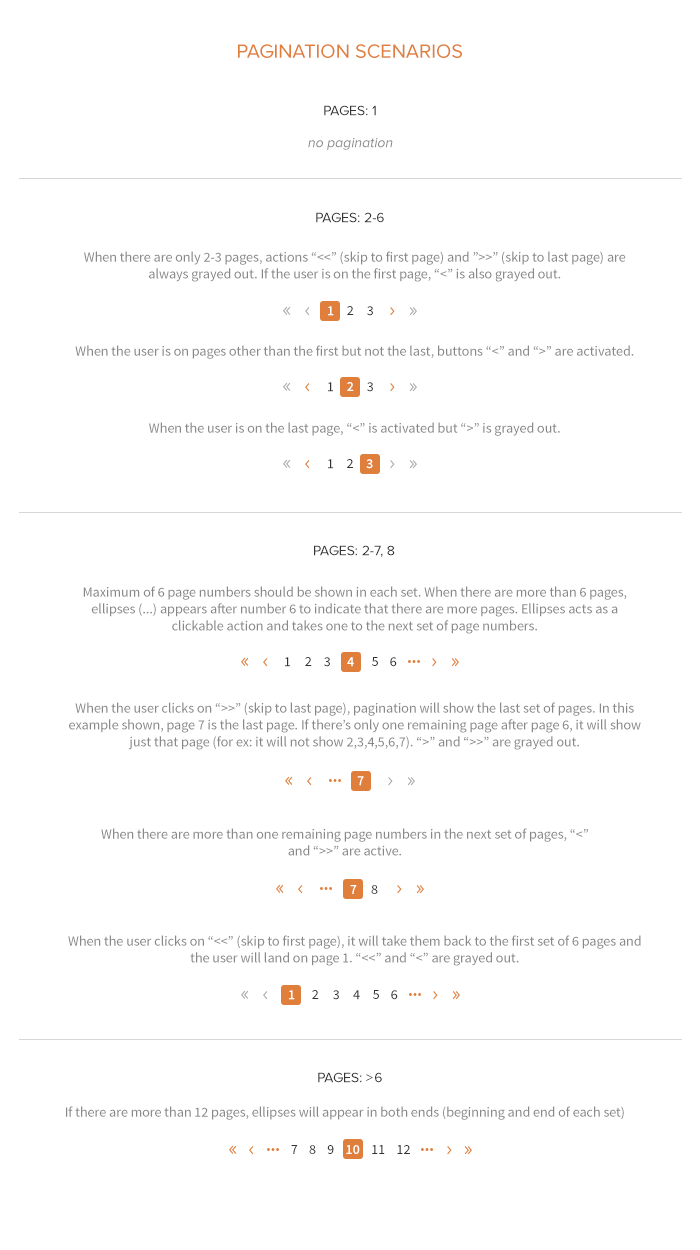
<style>
.page{position:relative;width:700px;height:1250px;background:#ffffff}
.page>*{position:absolute;margin:0}
.t1{font:20px "ProximaNovaA-Regular";color:#e07e3c;text-transform:uppercase}
.t2{font:14px "ProximaNovaA-Regular";color:#333333;text-transform:uppercase}
.t3{font:14px "ProximaNovaA-Regular";color:#888888;font-style:italic}
.t4{font:14px "SourceSansPro-Regular";color:#888888}
.t5{font:14px "SourceSansPro-Semibold";color:#ffffff}
.t6{font:14px "SourceSansPro-Regular";color:#333333}
.t7{font:14px "SourceSansPro-Semibold";color:#333333}
.t8{font:14px "SourceSansPro-Regular"}
</style>
<div class="page">
<p class="t1" style="left:238px;top:44px;width:224px;height:14px">Pagination scenarios</p>
<p class="t2" style="left:324px;top:105px;width:52px;height:11px">pages: 1</p>
<p class="t3" style="left:308px;top:138px;width:85px;height:12px">no pagination</p>
<p class="t2" style="left:316px;top:212px;width:68px;height:11px">pages: 2-6</p>
<p class="t4" style="left:84px;top:251px;width:542px;height:31px;text-align:center">When there are only 2-3 pages, actions “&lt;&lt;” (skip to first page) and ”&gt;&gt;” (skip to last page) are always grayed out. If the user is on the first page, “&lt;” is also grayed out.</p>
<p class="t5" style="left:328px;top:306px;width:6px;height:10px">1</p>
<p class="t6" style="left:347px;top:306px;width:7px;height:9px"><span class="t7">     </span>2</p>
<p class="t6" style="left:367px;top:306px;width:6px;height:10px">3</p>
<p class="t4" style="left:75px;top:345px;width:559px;height:14px">When the user is on pages other than the first but not the last, buttons “&lt;” and “&gt;” are activated.</p>
<p class="t6" style="left:328px;top:382px;width:5px;height:10px">1</p>
<p class="t5" style="left:347px;top:382px;width:7px;height:9px">2</p>
<p class="t6" style="left:367px;top:382px;width:6px;height:10px">3</p>
<p class="t4" style="left:149px;top:422px;width:411px;height:14px">When the user is on the last page, “&lt;” is activated but “&gt;” is grayed out.</p>
<p class="t6" style="left:328px;top:459px;width:5px;height:10px">1</p>
<p class="t6" style="left:347px;top:459px;width:6px;height:9px">2</p>
<p class="t5" style="left:366px;top:459px;width:7px;height:10px">3</p>
<p class="t2" style="left:314px;top:545px;width:81px;height:12px">pages: 2-7, 8</p>
<p class="t4" style="left:83px;top:586px;width:544px;height:48px;text-align:center">Maximum of 6 page numbers should be shown in each set. When there are more than 6 pages, ellipses (...) appears after number 6 to indicate that there are more pages. Ellipses acts as a clickable action and takes one to the next set of page numbers.</p>
<p class="t6" style="left:285px;top:657px;width:5px;height:10px">1</p>
<p class="t6" style="left:305px;top:657px;width:7px;height:9px"><span class="t7">     </span>2</p>
<p class="t6" style="left:324px;top:657px;width:6px;height:10px">3</p>
<p class="t5" style="left:347px;top:657px;width:7px;height:10px">4</p>
<p class="t6" style="left:372px;top:657px;width:6px;height:9px"><span class="t7">     </span>5</p>
<p class="t6" style="left:390px;top:657px;width:7px;height:10px">6</p>
<p class="t4" style="left:69px;top:702px;width:572px;height:48px;text-align:center">When the user clicks on “&gt;&gt;” (skip to last page), pagination will show the last set of pages. In this example shown, page 7 is the last page. If there’s only one remaining page after page 6, it will show just that page (for ex: it will not show 2,3,4,5,6,7). “&gt;” and “&gt;&gt;” are grayed out.</p>
<p class="t5" style="left:357px;top:776px;width:7px;height:10px">7</p>
<p class="t4" style="left:101px;top:828px;width:487px;height:28px;text-align:center">When there are more than one remaining page numbers in the next set of pages, “&lt;” and “&gt;&gt;” are active.</p>
<p class="t5" style="left:350px;top:885px;width:28px;height:9px">7<span class="t6">     8</span></p>
<p class="t4" style="left:68px;top:935px;width:573px;height:31px;text-align:center">When the user clicks on “&lt;&lt;” (skip to first page), it will take them back to the first set of 6 pages and the user will land on page 1. “&lt;&lt;” and “&lt;” are grayed out.</p>
<p class="t5" style="left:289px;top:990px;width:6px;height:10px">1</p>
<p class="t6" style="left:312px;top:990px;width:7px;height:9px"><span class="t7">     </span>2</p>
<p class="t6" style="left:333px;top:990px;width:6px;height:10px">3</p>
<p class="t8" style="left:353px;top:990px;width:7px;height:10px">4</p>
<p class="t6" style="left:373px;top:990px;width:6px;height:9px"><span class="t7">     </span>5</p>
<p class="t6" style="left:391px;top:990px;width:7px;height:10px">6</p>
<p class="t2" style="left:318px;top:1072px;width:64px;height:11px">pages: &gt;6</p>
<p class="t4" style="left:66px;top:1106px;width:558px;height:14px">If there are more than 12 pages, ellipses will appear in both ends (beginning and end of each set)</p>
<p class="t6" style="left:291px;top:1145px;width:119px;height:9px">7    8    9    <span class="t5">10</span>    11    12</p>
</div>
